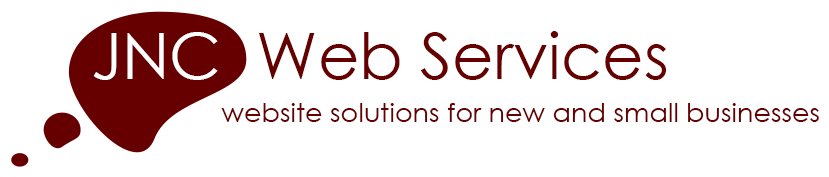
<style>
.page{position:relative;width:829px;height:177px;background:#ffffff}
.page>*{position:absolute;margin:0}
.t1{font:63.9px "CenturyGothic";color:#ffffff}
.t2{font:63.9px "CenturyGothic";color:#660000}
.t3{font:27px "CenturyGothic";color:#660000}
</style>
<div class="page">
<p class="t1" style="left:93px;top:32px;width:125px;height:48px">JNC</p>
<p class="t2" style="left:259px;top:31px;width:407px;height:49px">Web Services</p>
<p class="t3" style="left:221px;top:103px;width:598px;height:19px">website solutions for new and small businesses</p>
</div>
